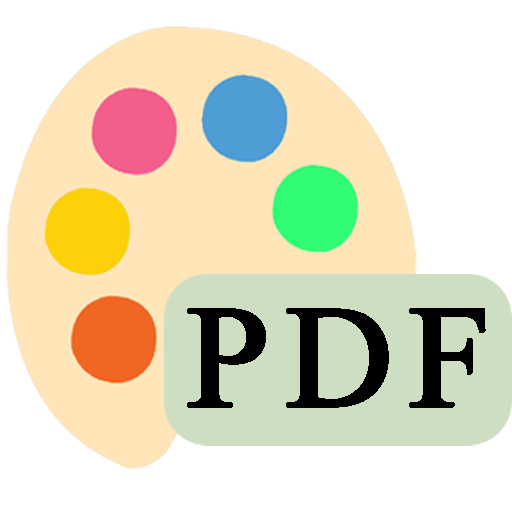
<style>
.page{position:relative;width:512px;height:512px;background:#ffffff}
.page>*{position:absolute;margin:0}
.t1{font:144.5px "TimesNewRomanPSMT";letter-spacing:0.1em;color:#000000;font-weight:bold}
</style>
<div class="page">
<p class="t1" style="left:187px;top:308px;width:299px;height:100px">PDF</p>
</div>
